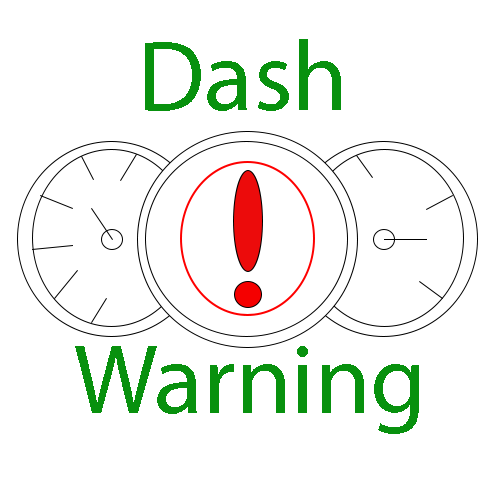
<style>
.page{position:relative;width:500px;height:500px;background:#ffffff}
.page>*{position:absolute;margin:0}
.t1{font:100px "MyriadPro-Regular";color:#08910e}
</style>
<div class="page">
<p class="t1" style="left:145px;top:39px;width:196px;height:72px">Dash</p>
<p class="t1" style="left:75px;top:346px;width:344px;height:88px">Warning</p>
</div>
